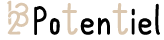
<style>
.page{position:relative;width:164px;height:40px;background:#ffffff}
.page>*{position:absolute;margin:0}
.t1{font:34px "BrownieGirlyRegular";letter-spacing:0.035em;color:#dbc7af}
.t2{font:41px "BrownieGirlyRegular";letter-spacing:0.035em;color:#000000}
.t3{font:41px "BrownieGirlyRegular";letter-spacing:0.035em;color:#dbc7af}
</style>
<div class="page">
<p class="t1" style="left:7px;top:0px;width:5px;height:25px">1</p>
<p class="t1" style="left:14px;top:2px;width:15px;height:25px">3</p>
<p class="t2" style="left:34px;top:3px;width:126px;height:32px">Po<span class="t3">t</span>en<span class="t3">t</span>iel</p>
<p class="t1" style="left:7px;top:10px;width:14px;height:25px">2</p>
</div>
